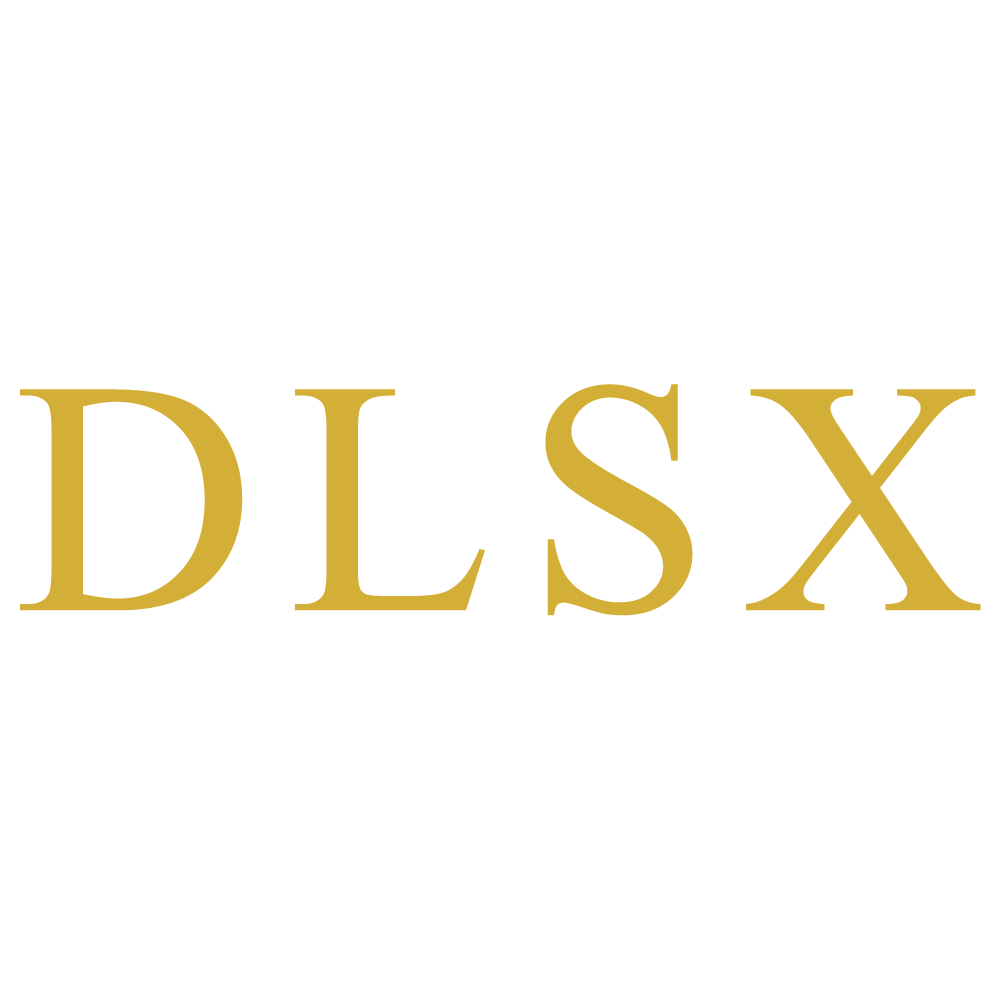
<style>
.page{position:relative;width:1000px;height:1000px;background:#ffffff}
.page>*{position:absolute;margin:0}
.t1{font:333.3px "TimesNewRomanPSMT";letter-spacing:0.1em;color:#d4af37}
</style>
<div class="page">
<p class="t1" style="left:20px;top:384px;width:961px;height:232px">DLSX</p>
</div>
